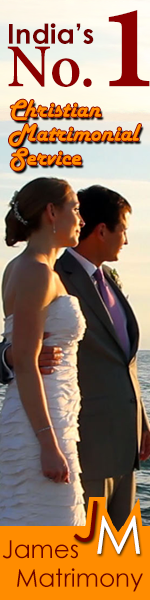
<style>
.page{position:relative;width:150px;height:600px}
.page>*{position:absolute;margin:0}
.t1{font:66.3px "AdobeGurmukhi-Bold";color:#8b0000}
.t2{font:148.7px "AdobeGurmukhi-Bold";color:#8b0000}
.t3{font:27.6px "CenturyGothic-Bold";color:#700000}
.t4{font:25px/24px "HarlowSolid";color:#ff8c00}
.t5{font:57px "CenturyGothic";color:#700000}
.t6{font:53px "CenturyGothic";color:#ffffff}
.t7{font:24.7px/28.8px "CenturyGothic";color:#700000}
</style>
<div class="page">
<p class="t1" style="left:7px;top:10px;width:143px;height:77px">No.<span class="t2">1</span></p>
<p class="t3" style="left:9px;top:23px;width:85px;height:21px">India’s</p>
<p class="t4" style="left:9px;top:99px;width:132px;height:72px">Christian <br>Matrimonial<br>Service</p>
<p class="t5" style="left:73px;top:500px;width:25px;height:42px;rotate:6deg">J</p>
<p class="t6" style="left:97px;top:515px;width:43px;height:39px">M</p>
<p class="t7" style="left:2px;top:540px;width:141px;height:52px">James<br>   Matrimony</p>
</div>
